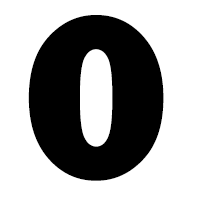
<style>
.page{position:relative;width:200px;height:200px;background:#ffffff}
.page>*{position:absolute;margin:0}
.t1{font:236.9px "Rockwell-ExtraBold";color:#000000}
</style>
<div class="page">
<p class="t1" style="left:28px;top:15px;width:136px;height:166px">0</p>
</div>
